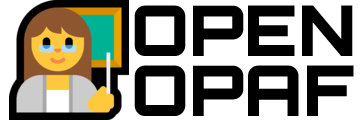
<style>
.page{position:relative;width:360px;height:120px;background:#ffffff}
.page>*{position:absolute;margin:0}
.t1{font:70px "Orbitron-Black";color:#000000}
</style>
<div class="page">
<p class="t1" style="left:134px;top:5px;width:219px;height:51px">OPEN</p>
<p class="t1" style="left:134px;top:65px;width:220px;height:51px">OPAF</p>
</div>
